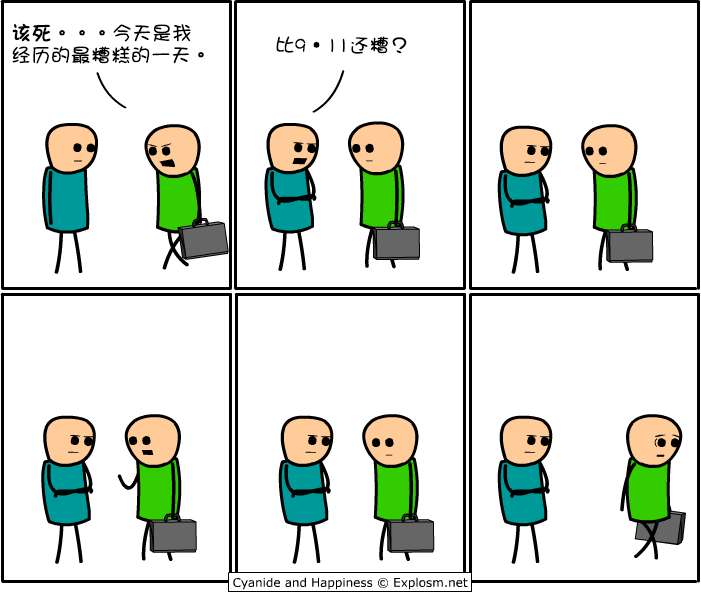
<style>
.page{position:relative;width:701px;height:593px;background:#ffffff}
.page>*{position:absolute;margin:0}
.t1{font:20px/22px "DFGirl";color:#000000}
.t2{font:20px/22px "DFGirl";color:#000000;font-weight:bold}
.t3{font:20px "DFGirl";color:#000000}
</style>
<div class="page">
<p class="t1" style="left:12px;top:23px;width:192px;height:41px"><span class="t2">该死</span>。。。今天是我<br>经历的最糟糕的一天。</p>
<p class="t3" style="left:276px;top:36px;width:131px;height:18px">比9·11还糟？</p>
</div>
